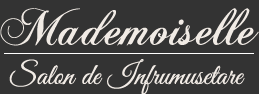
<style>
.page{position:relative;width:259px;height:94px;background:#333333}
.page>*{position:absolute;margin:0}
.t1{font:54px "ChopinScript";color:#f1ebe5}
.t2{font:30px "GreatVibes-Regular";color:#f1ebe5}
</style>
<div class="page">
<p class="t1" style="left:0px;top:8px;width:259px;height:38px">Mademoiselle</p>
<p class="t2" style="left:9px;top:59px;width:236px;height:36px">Salon de Infrumusetare</p>
</div>
